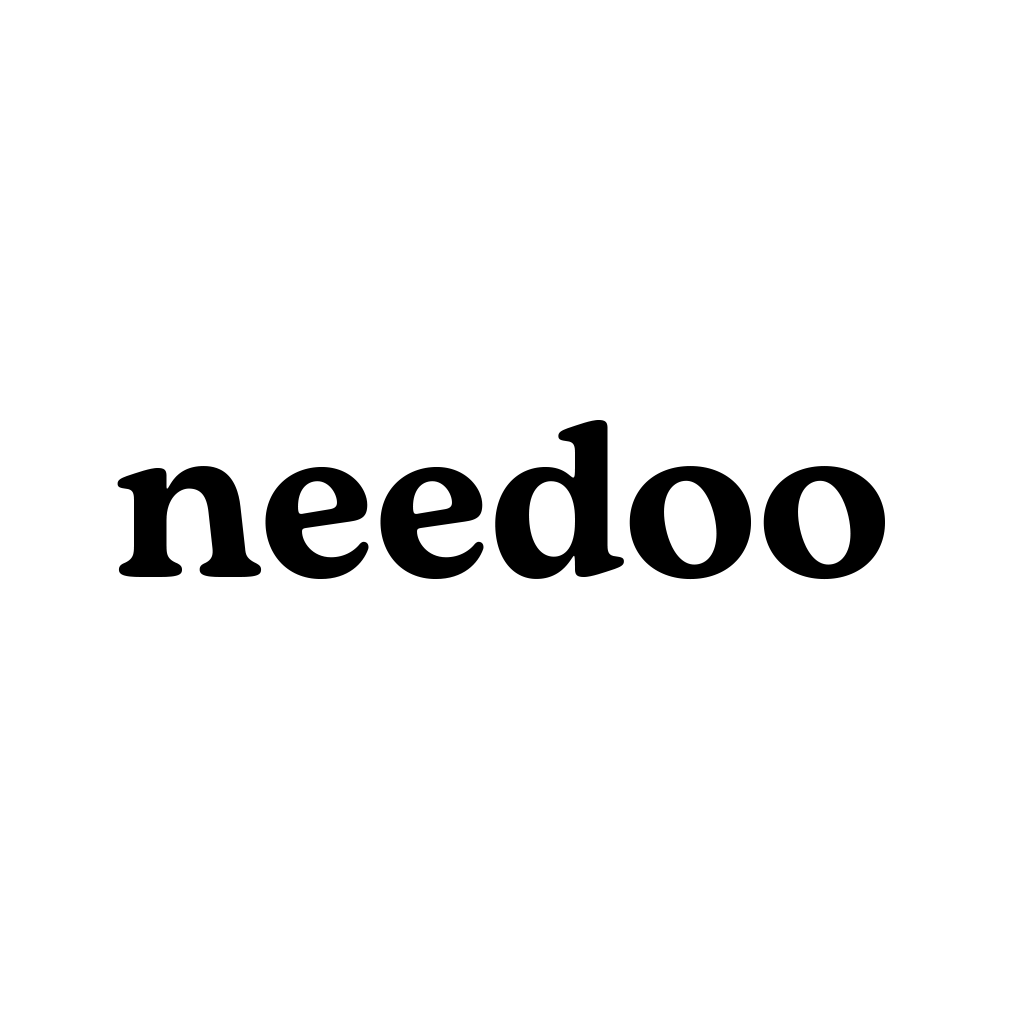
<style>
.page{position:relative;width:1024px;height:1024px;background:#ffffff}
.page>*{position:absolute;margin:0}
.t1{font:221.4px "Bogart-Semibold";color:#000000}
</style>
<div class="page">
<p class="t1" style="left:117px;top:420px;width:768px;height:160px">needoo</p>
</div>
